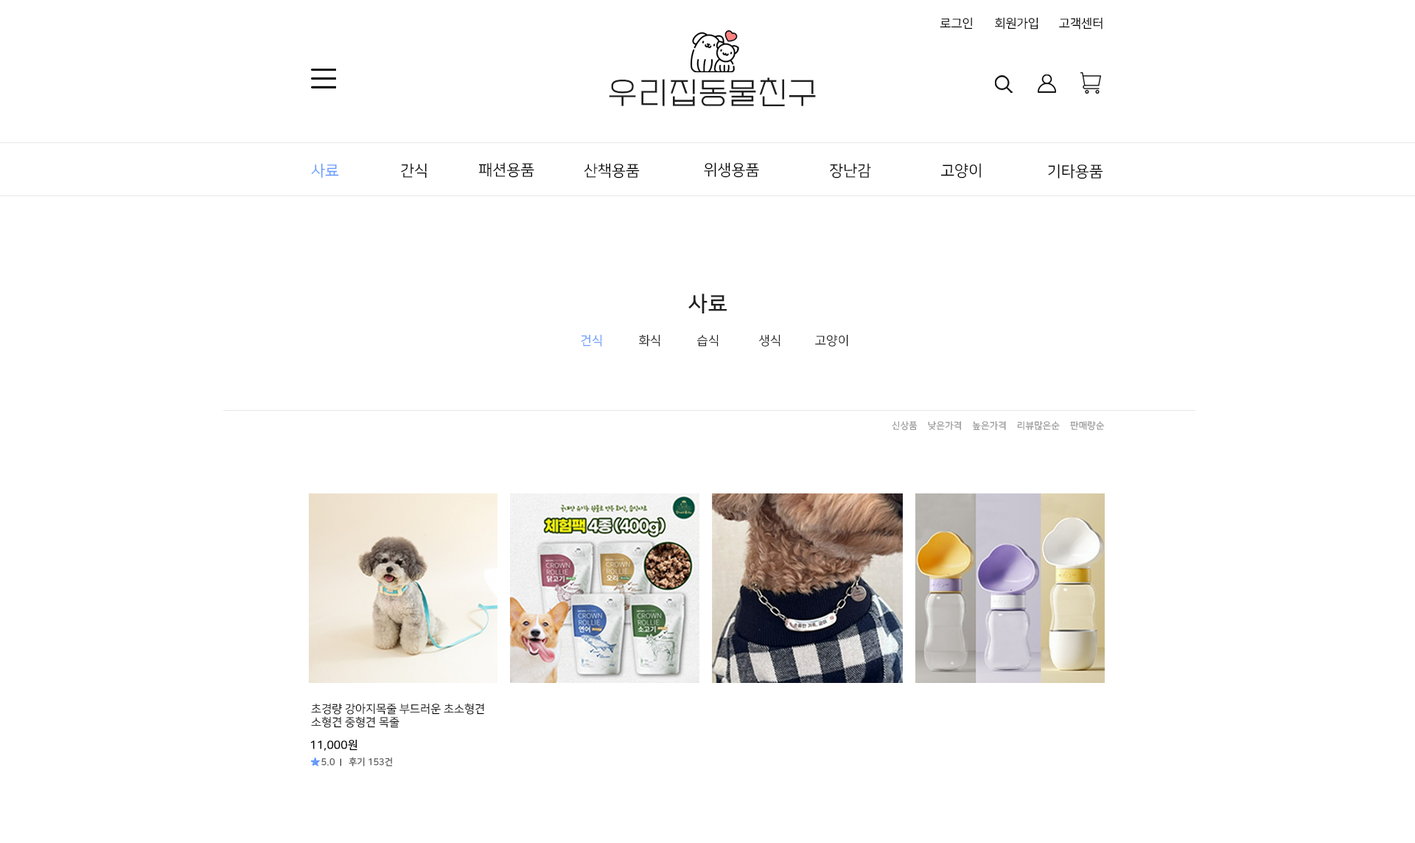
<style>
.page{position:relative;width:1415px;height:843px;background:#ffffff}
.page>*{position:absolute;margin:0}
.t1{font:12.3px "NanumSquareR";color:#000000}
.t2{font:30.7px "EF_watermelonSalad";letter-spacing:0.025em;color:#202020}
.t3{font:15.4px "NanumSquareR";color:#669aff}
.t4{font:15.4px "NanumSquareR";color:#000000}
.t5{font:21.5px "NanumSquareB";letter-spacing:0.025em;color:#202020}
.t6{font:12.3px "NanumSquareR";letter-spacing:0.025em;color:#669aff}
.t7{font:12.3px "NanumSquareR";letter-spacing:0.025em;color:#202020}
.t8{font:9.2px "NanumSquareR";letter-spacing:0.025em;color:#949494}
.t9{font:11.4px "NanumSquareR";color:#000000}
.t10{font:11.4px "NanumSquareB";color:#000000}
.t11{font:9.2px "NanumSquareB";color:#636363}
.t12{font:7.7px "NanumSquareB"}
</style>
<div class="page">
<p class="t1" style="left:940px;top:17px;width:33px;height:12px">로그인</p>
<p class="t1" style="left:995px;top:17px;width:44px;height:12px">회원가입</p>
<p class="t1" style="left:1059px;top:17px;width:44px;height:12px">고객센터</p>
<p class="t2" style="left:609px;top:77px;width:207px;height:29px">우리집동물친구</p>
<p class="t3" style="left:311px;top:163px;width:28px;height:15px">사료</p>
<p class="t4" style="left:401px;top:163px;width:26px;height:15px">간식</p>
<p class="t4" style="left:478px;top:162px;width:56px;height:16px">패션용품</p>
<p class="t4" style="left:584px;top:163px;width:56px;height:15px">산책용품</p>
<p class="t4" style="left:704px;top:162px;width:55px;height:16px">위생용품</p>
<p class="t4" style="left:830px;top:163px;width:41px;height:15px">장난감</p>
<p class="t4" style="left:941px;top:163px;width:40px;height:15px">고양이</p>
<p class="t4" style="left:1048px;top:164px;width:55px;height:15px">기타용품</p>
<p class="t5" style="left:688px;top:293px;width:39px;height:20px">사료</p>
<p class="t6" style="left:581px;top:334px;width:21px;height:12px">건식</p>
<p class="t7" style="left:639px;top:334px;width:21px;height:12px">화식</p>
<p class="t7" style="left:697px;top:334px;width:22px;height:12px">습식</p>
<p class="t7" style="left:759px;top:334px;width:22px;height:12px">생식</p>
<p class="t7" style="left:815px;top:334px;width:33px;height:12px">고양이</p>
<p class="t8" style="left:892px;top:421px;width:213px;height:9px">신상품    낮은가격    높은가격    리뷰많은순    판매량순</p>
<p class="t9" style="left:311px;top:702px;width:173px;height:26px">초경량 강아지목줄 부드러운 초소형견 <br>소형견 중형견 목줄</p>
<p class="t10" style="left:310px;top:739px;width:48px;height:11px">11,000원</p>
<p class="t11" style="left:321px;top:758px;width:14px;height:7px">5.0</p>
<p class="t12" style="left:340px;top:758px;width:1px;height:8px">ㅣ</p>
<p class="t11" style="left:349px;top:756px;width:44px;height:10px">후기 153건</p>
</div>
